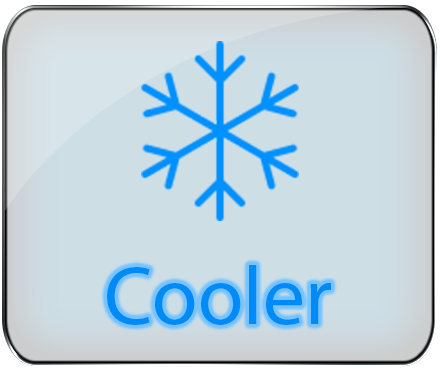
<style>
.page{position:relative;width:440px;height:369px;background:#cddee5}
.page>*{position:absolute;margin:0}
.t1{font:83.2px "MyriadPro-Regular";color:#008af5}
</style>
<div class="page">
<p class="t1" style="left:107px;top:265px;width:224px;height:60px">Cooler</p>
</div>
